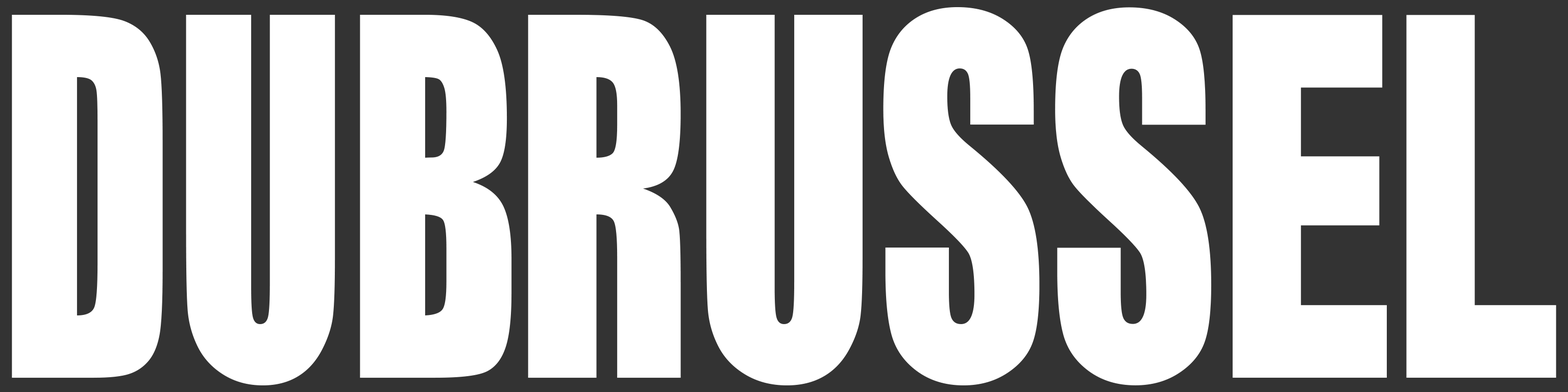
<style>
.page{position:relative;width:1568px;height:392px;background:#ffffff}
.page>*{position:absolute;margin:0}
.t1{font:458.9px "Impact";color:#ffffff;scale:0.69 1}
.t2{font:458.9px "Impact";color:#ffffff;scale:0.72 1}
</style>
<div class="page">
<p class="t1" style="left:12px;top:15px;width:500px;height:370px">DUB</p>
<p class="t2" style="left:528px;top:7px;width:512px;height:378px">RUS</p>
</div>
